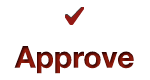
<style>
.page{position:relative;width:150px;height:80px;background:#ffffff}
.page>*{position:absolute;margin:0}
.t1{font:30px "HelveticaNeue-Bold"}
</style>
<div class="page">
<p class="t1" style="left:14px;top:46px;width:120px;height:28px">Approve</p>
</div>
